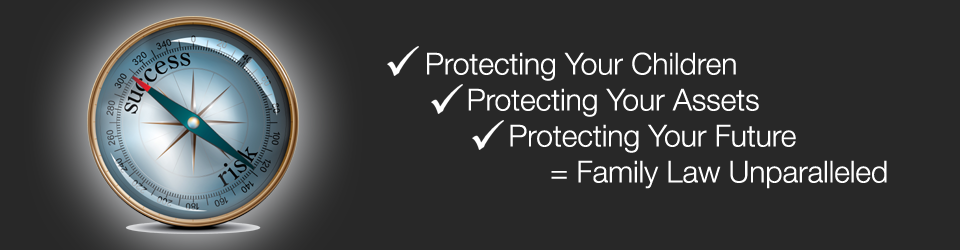
<style>
.page{position:relative;width:960px;height:250px;background:#282828}
.page>*{position:absolute;margin:0}
.t1{font:30px "HelveticaNeueLTStd-Lt";color:#ffffff}
</style>
<div class="page">
<p class="t1" style="left:427px;top:52px;width:460px;height:137px">Protecting Your Children<br>     Protecting Your Assets<br>          Protecting Your Future<br>               = Family Law Unparalleled</p>
</div>
